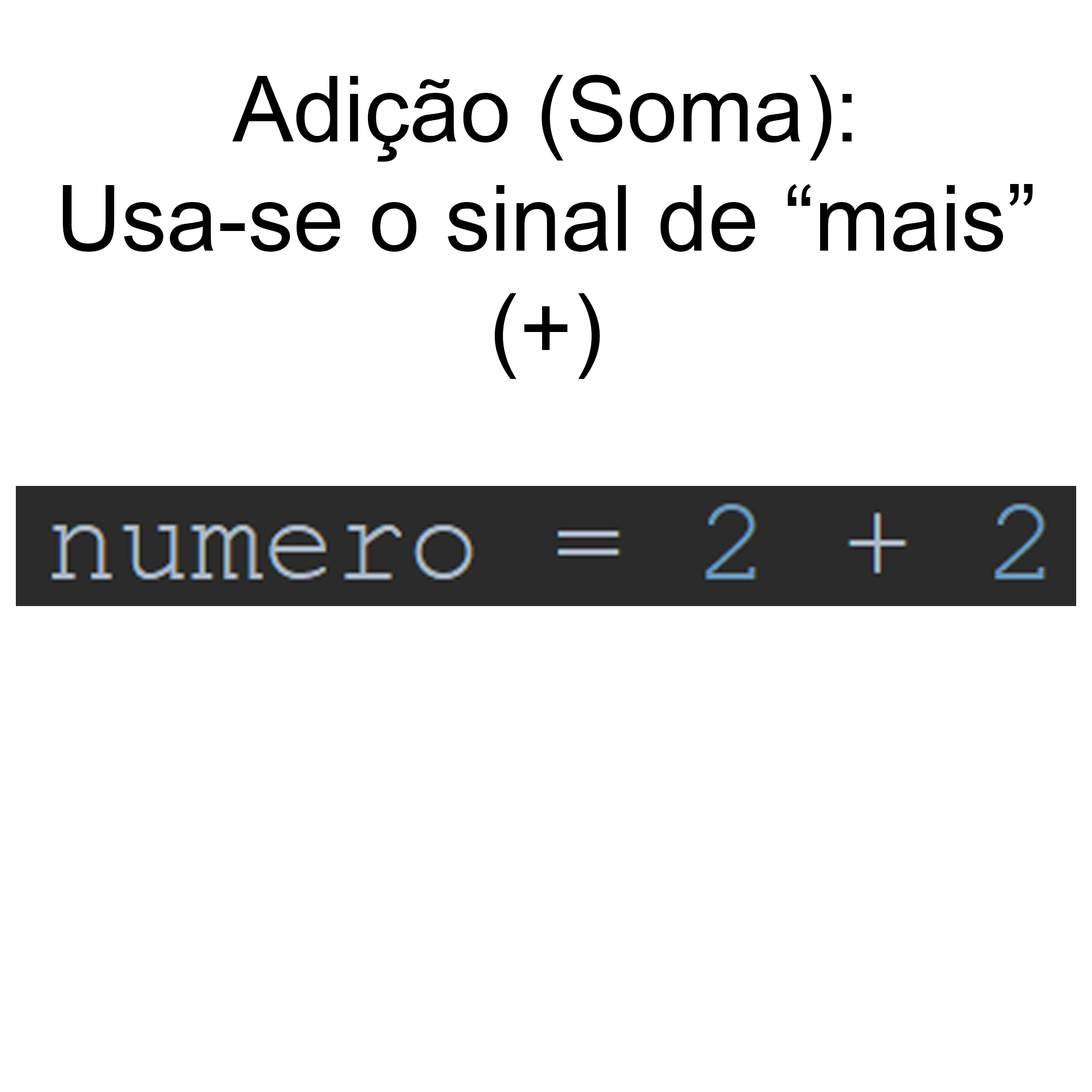
<style>
.page{position:relative;width:1092px;height:1092px;background:#ffffff}
.page>*{position:absolute;margin:0}
.t1{font:91px "ArialMT";color:#000000}
</style>
<div class="page">
<p class="t1" style="left:63px;top:75px;width:970px;height:304px;text-align:center">Adição (Soma):<br>Usa-se o sinal de “mais”<br>(+)</p>
</div>
